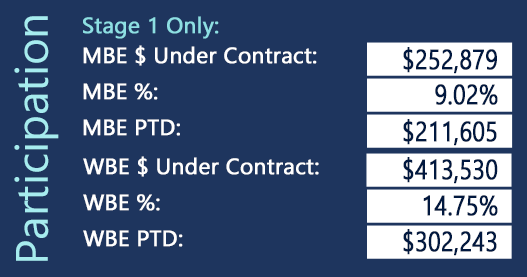
<style>
.page{position:relative;width:527px;height:277px;background:#1e355e}
.page>*{position:absolute;margin:0}
.t1{font:45.6px "Gadugi";color:#a6ecef}
.t2{font:22.2px "Gadugi";color:#8ddfe3;font-weight:bold}
.t3{font:22.2px "Gadugi";color:#ffffff;font-weight:bold}
.t4{font:27.8px "Gadugi";color:#01183f;font-weight:bold;scale:0.82 1}
</style>
<div class="page">
<p class="t1" style="left:14px;top:16px;width:45px;height:245px;rotate:-90deg">Participation</p>
<p class="t2" style="left:83px;top:16px;width:136px;height:23px">Stage 1 Only:</p>
<p class="t3" style="left:83px;top:45px;width:234px;height:21px">MBE $ Under Contract:</p>
<p class="t4" style="left:403px;top:47px;width:94px;height:27px">$252,879</p>
<p class="t3" style="left:83px;top:83px;width:75px;height:17px">MBE %:</p>
<p class="t4" style="left:435px;top:84px;width:63px;height:21px">9.02%</p>
<p class="t3" style="left:83px;top:119px;width:97px;height:17px">MBE PTD:</p>
<p class="t4" style="left:403px;top:119px;width:94px;height:27px">$211,605</p>
<p class="t3" style="left:83px;top:156px;width:236px;height:21px">WBE $ Under Contract:</p>
<p class="t4" style="left:403px;top:157px;width:95px;height:27px">$413,530</p>
<p class="t3" style="left:83px;top:194px;width:77px;height:17px">WBE %:</p>
<p class="t4" style="left:423px;top:195px;width:75px;height:21px">14.75%</p>
<p class="t3" style="left:83px;top:230px;width:100px;height:17px">WBE PTD:</p>
<p class="t4" style="left:403px;top:229px;width:94px;height:27px">$302,243</p>
</div>
